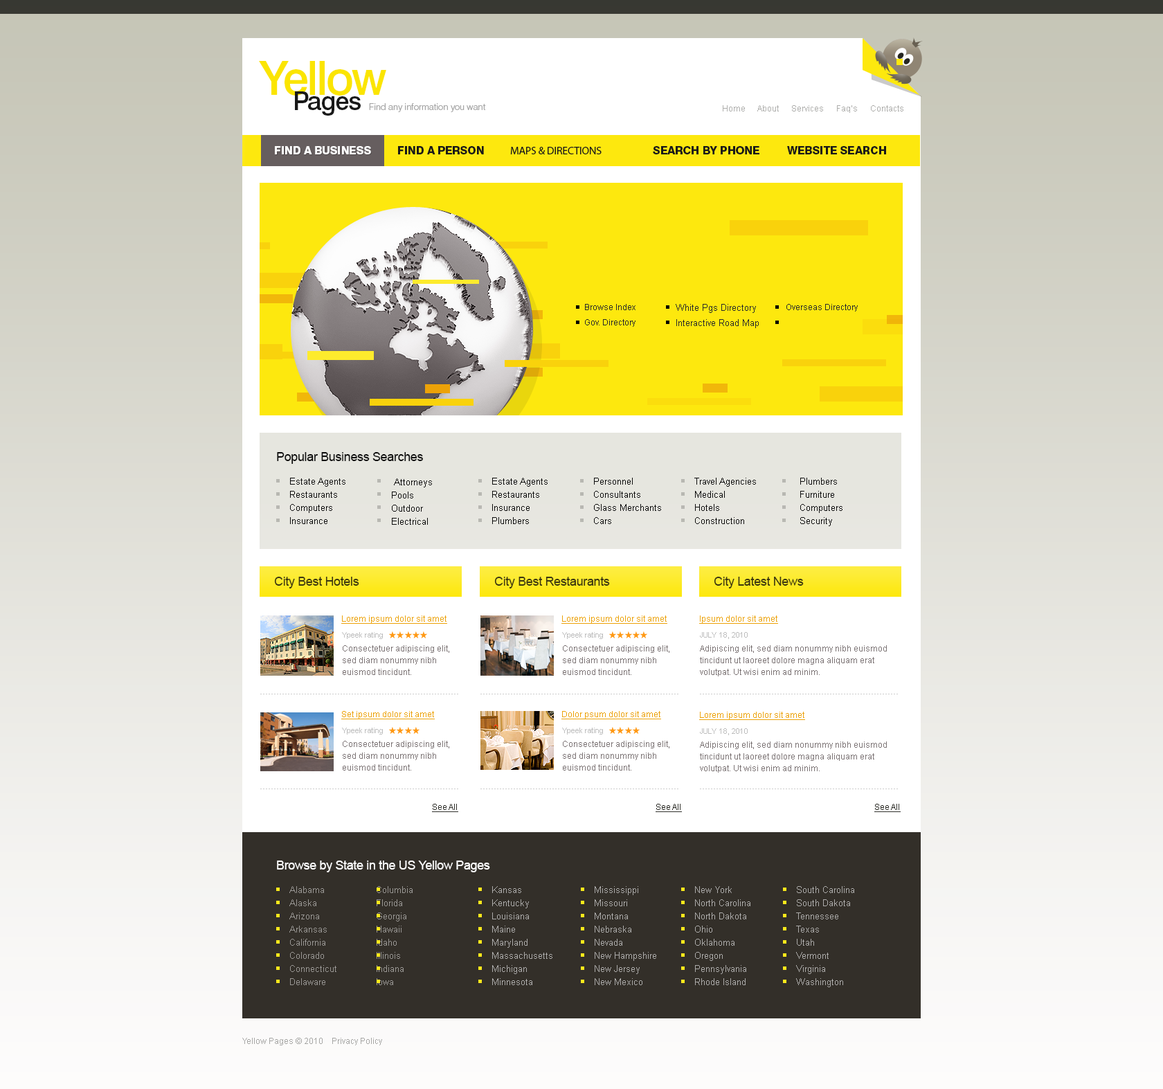
<style>
.page{position:relative;width:1163px;height:1089px}
.page>*{position:absolute;margin:0}
.t1{font:47.1px "Swiss721BT-Medium";letter-spacing:-0.04em;color:#fbe502}
.t2{font:25.6px "Swiss721BT-Medium";letter-spacing:-0.04em;color:#191919}
.t3{font:9px "Swiss721BT-Light";color:#a4a4a4}
.t4{font:8.3px "ArialMT";color:#aeaeac}
.t5{font:11.1px "Swiss721BT-Heavy";letter-spacing:-0.02em;color:#ffffff;text-transform:uppercase}
.t6{font:11.1px "Swiss721BT-Heavy";letter-spacing:-0.02em;color:#191919;text-transform:uppercase}
.t7{font:11.1px "MyriadPro-Regular";letter-spacing:-0.02em;color:#191919;text-transform:uppercase}
.t8{font:8.3px/15.2px "ArialMT";color:#2a2a2a}
.t9{font:9px/15.2px "ArialMT";color:#2a2a2a}
.t10{font:8.3px "ArialMT";color:#2a2a2a}
.t11{font:12.5px "ArialMT";letter-spacing:-0.02em;color:#0d0d0d}
.t12{font:9px/13.2px "ArialMT";color:#0d0d0d}
.t13{font:12.5px "ArialMT";letter-spacing:-0.02em;color:#3c3710}
.t14{font:8.3px "ArialMT";color:#eca208;text-decoration:underline}
.t15{font:7.6px "ArialMT";color:#bebebe}
.t16{font:8.3px/11.8px "ArialMT";color:#7c7475}
.t17{font:8.3px "ArialMT";color:#30302b;text-decoration:underline}
.t18{font:12.5px "ArialMT";letter-spacing:-0.02em;color:#ffffff}
.t19{font:9px/13.2px "ArialMT";color:#999794}
.t20{font:9px/13.2px "ArialMT";color:#adacab}
.t21{font:8.3px "ArialMT";color:#a7a7a5}
</style>
<div class="page">
<p class="t1" style="left:259px;top:61px;width:127px;height:35px">Yellow</p>
<p class="t2" style="left:295px;top:91px;width:66px;height:25px">Pages</p>
<p class="t3" style="left:369px;top:103px;width:117px;height:9px">Find any information you want</p>
<p class="t4" style="left:723px;top:105px;width:180px;height:8px">Home      About      Services      Faq’s      Contacts</p>
<p class="t5" style="left:275px;top:146px;width:96px;height:8px">Find a business</p>
<p class="t6" style="left:398px;top:146px;width:86px;height:8px">Find a person</p>
<p class="t7" style="left:510px;top:147px;width:92px;height:7px">Maps &amp; directions</p>
<p class="t6" style="left:653px;top:146px;width:106px;height:8px">Search by phone</p>
<p class="t6" style="left:787px;top:146px;width:99px;height:8px">Website search</p>
<p class="t8" style="left:585px;top:304px;width:51px;height:23px">Browse Index<br>Gov. Directory</p>
<p class="t9" style="left:676px;top:304px;width:83px;height:24px">White Pgs Directory<br>Interactive Road Map</p>
<p class="t10" style="left:786px;top:304px;width:72px;height:8px">Overseas Directory</p>
<p class="t11" style="left:277px;top:452px;width:146px;height:12px">Popular Business Searches</p>
<p class="t12" style="left:290px;top:478px;width:55px;height:46px">Estate Agents<br>Restaurants<br>Computers<br>Insurance</p>
<p class="t12" style="left:392px;top:478px;width:40px;height:47px">Attorneys<br>Pools<br>Outdoor<br>Electrical</p>
<p class="t12" style="left:492px;top:478px;width:56px;height:46px">Estate Agents<br>Restaurants<br>Insurance<br>Plumbers</p>
<p class="t12" style="left:594px;top:478px;width:67px;height:46px">Personnel <br>Consultants<br>Glass Merchants<br>Cars</p>
<p class="t12" style="left:694px;top:478px;width:62px;height:46px">Travel Agencies<br>Medical <br>Hotels<br>Construction</p>
<p class="t12" style="left:800px;top:478px;width:43px;height:48px">Plumbers<br>Furniture<br>Computers<br>Security</p>
<p class="t13" style="left:274px;top:577px;width:85px;height:11px">City Best Hotels</p>
<p class="t13" style="left:494px;top:577px;width:116px;height:11px">City Best Restaurants</p>
<p class="t13" style="left:714px;top:577px;width:90px;height:11px">City Latest News</p>
<p class="t14" style="left:341px;top:615px;width:106px;height:9px">Lorem ipsum dolor sit amet</p>
<p class="t14" style="left:561px;top:615px;width:106px;height:9px">Lorem ipsum dolor sit amet</p>
<p class="t14" style="left:699px;top:615px;width:79px;height:9px">Ipsum dolor sit amet</p>
<p class="t15" style="left:342px;top:632px;width:41px;height:7px">Ypeek rating</p>
<p class="t15" style="left:562px;top:632px;width:41px;height:7px">Ypeek rating</p>
<p class="t15" style="left:700px;top:632px;width:48px;height:7px">JULY 18, 2010</p>
<p class="t16" style="left:343px;top:645px;width:106px;height:30px">Consectetuer adipiscing elit, sed diam nonummy nibh euismod tincidunt.</p>
<p class="t16" style="left:563px;top:645px;width:106px;height:30px">Consectetuer adipiscing elit, sed diam nonummy nibh euismod tincidunt.</p>
<p class="t16" style="left:700px;top:645px;width:187px;height:31px">Adipiscing elit, sed diam nonummy nibh euismod tincidunt ut laoreet dolore magna aliquam erat volutpat. Ut wisi enim ad minim.</p>
<p class="t14" style="left:341px;top:711px;width:94px;height:8px">Set ipsum dolor sit amet</p>
<p class="t14" style="left:561px;top:711px;width:100px;height:8px">Dolor psum dolor sit amet</p>
<p class="t14" style="left:699px;top:712px;width:106px;height:8px">Lorem ipsum dolor sit amet</p>
<p class="t15" style="left:342px;top:728px;width:41px;height:7px">Ypeek rating</p>
<p class="t15" style="left:562px;top:728px;width:41px;height:7px">Ypeek rating</p>
<p class="t15" style="left:700px;top:728px;width:48px;height:7px">JULY 18, 2010</p>
<p class="t16" style="left:343px;top:741px;width:106px;height:30px">Consectetuer adipiscing elit, sed diam nonummy nibh euismod tincidunt.</p>
<p class="t16" style="left:563px;top:741px;width:106px;height:30px">Consectetuer adipiscing elit, sed diam nonummy nibh euismod tincidunt.</p>
<p class="t16" style="left:700px;top:741px;width:187px;height:32px">Adipiscing elit, sed diam nonummy nibh euismod tincidunt ut laoreet dolore magna aliquam erat volutpat. Ut wisi enim ad minim.</p>
<p class="t17" style="left:432px;top:804px;width:26px;height:8px">See All</p>
<p class="t17" style="left:656px;top:804px;width:26px;height:8px">See All</p>
<p class="t17" style="left:874px;top:804px;width:27px;height:8px">See All</p>
<p class="t18" style="left:277px;top:861px;width:213px;height:11px">Browse by State in the US Yellow Pages</p>
<p class="t19" style="left:289px;top:886px;width:47px;height:99px">Alabama<br>Alaska<br>Arizona<br>Arkansas<br>California<br>Colorado<br>Connecticut<br>Delaware</p>
<p class="t19" style="left:377px;top:886px;width:36px;height:99px">Columbia<br>Florida<br>Georgia<br>Hawaii<br>Idaho<br>Illinois<br>Indiana<br>Iowa</p>
<p class="t20" style="left:492px;top:886px;width:60px;height:99px">Kansas<br>Kentucky<br>Louisiana<br>Maine<br>Maryland<br>Massachusetts<br>Michigan<br>Minnesota</p>
<p class="t20" style="left:595px;top:886px;width:61px;height:99px">Mississippi<br>Missouri<br>Montana<br>Nebraska<br>Nevada<br>New Hampshire<br>New Jersey<br>New Mexico</p>
<p class="t20" style="left:695px;top:886px;width:55px;height:99px">New York<br>North Carolina<br>North Dakota<br>Ohio<br>Oklahoma<br>Oregon<br>Pennsylvania<br>Rhode Island</p>
<p class="t20" style="left:796px;top:886px;width:58px;height:101px">South Carolina<br>South Dakota<br>Tennessee<br>Texas<br>Utah<br>Vermont<br>Virginia<br>Washington</p>
<p class="t21" style="left:242px;top:1038px;width:140px;height:7px">Yellow Pages © 2010    Privacy Policy</p>
</div>
